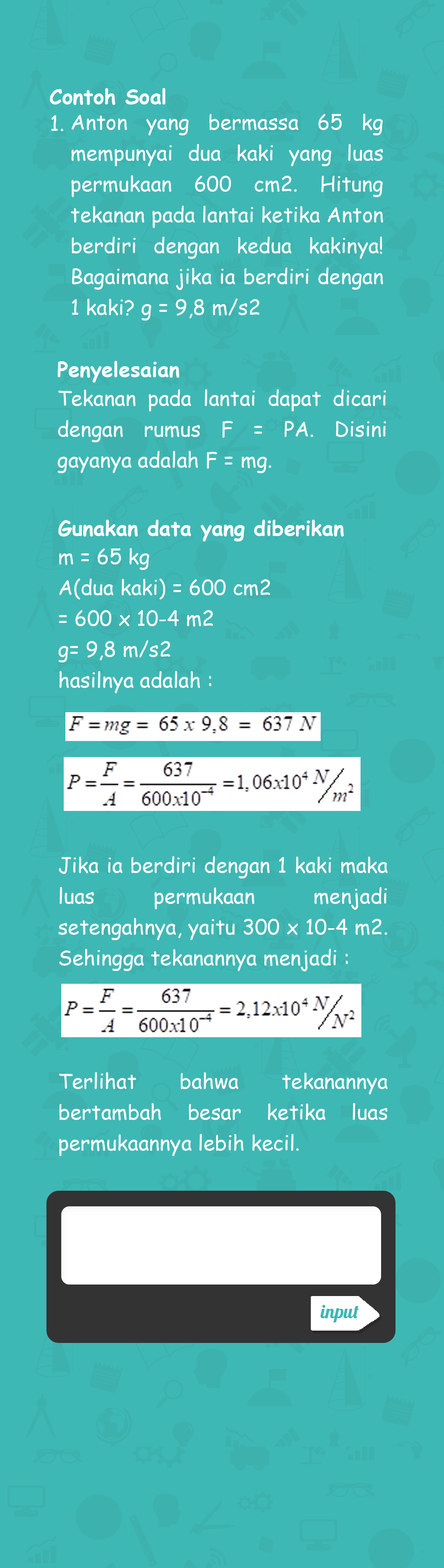
<style>
.page{position:relative;width:444px;height:1568px;background:#3eb8b4}
.page>*{position:absolute;margin:0}
.t1{font:20.6px "ComicSansMS-Bold";color:#ffffff}
.t2{font:20.6px/30.9px "ComicSansMS";color:#ffffff}
.t3{font:20.6px "ComicSansMS";color:#ffffff}
.t4{font:18.9px "Lobster-Regular";color:#3db6b2}
</style>
<div class="page">
<p class="t1" style="left:50px;top:88px;width:115px;height:17px">Contoh Soal</p>
<p class="t2" style="left:71px;top:114px;width:312px;height:207px;text-align:justify">Anton yang bermassa 65 kg mempunyai dua kaki yang luas permukaan 600 cm2. Hitung tekanan pada lantai ketika Anton berdiri dengan kedua kakinya! Bagaimana jika ia berdiri dengan 1 kaki? g = 9,8 m/s2</p>
<p class="t3" style="left:51px;top:115px;width:12px;height:16px">1.</p>
<p class="t1" style="left:58px;top:361px;width:122px;height:22px">Penyelesaian</p>
<p class="t2" style="left:58px;top:389px;width:328px;height:84px;text-align:justify">Tekanan pada lantai dapat dicari dengan rumus F = PA. Disini gayanya adalah F = mg.</p>
<p class="t1" style="left:58px;top:520px;width:286px;height:21px">Gunakan data yang diberikan</p>
<p class="t2" style="left:58px;top:548px;width:330px;height:608px;text-align:justify">m = 65 kg<br>A(dua kaki) = 600 cm2<br>= 600 x 10-4 m2<br>g= 9,8 m/s2<br>hasilnya adalah :<br> <br> <br><br><br><br>Jika ia berdiri dengan 1 kaki maka luas permukaan menjadi setengahnya, yaitu 300 x 10-4 m2. Sehingga tekanannya menjadi :<br> <br><br><br>Terlihat bahwa tekanannya bertambah besar ketika luas permukaannya lebih kecil.</p>
<p class="t4" style="left:321px;top:1305px;width:38px;height:18px">input</p>
</div>
